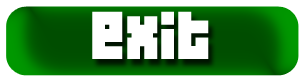
<style>
.page{position:relative;width:305px;height:81px;background:#ffffff}
.page>*{position:absolute;margin:0}
.t1{font:60px "04b19";color:#ffffff}
</style>
<div class="page">
<p class="t1" style="left:92px;top:11px;width:117px;height:48px">exit</p>
</div>
